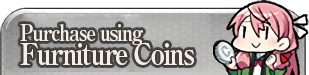
<style>
.page{position:relative;width:309px;height:75px}
.page>*{position:absolute;margin:0}
.t1{font:30px/17px "RyuminPro-ExBold";letter-spacing:-0.08em;color:#f8ece5;scale:0.9 1}
.t2{font:22px/17px "RyuminPro-ExBold";letter-spacing:-0.08em;color:#f8ece5;scale:0.9 1}
</style>
<div class="page">
<p class="t1" style="left:20px;top:24px;width:174px;height:42px"><span class="t2">Purchase using <br></span>Furniture Coins</p>
</div>
